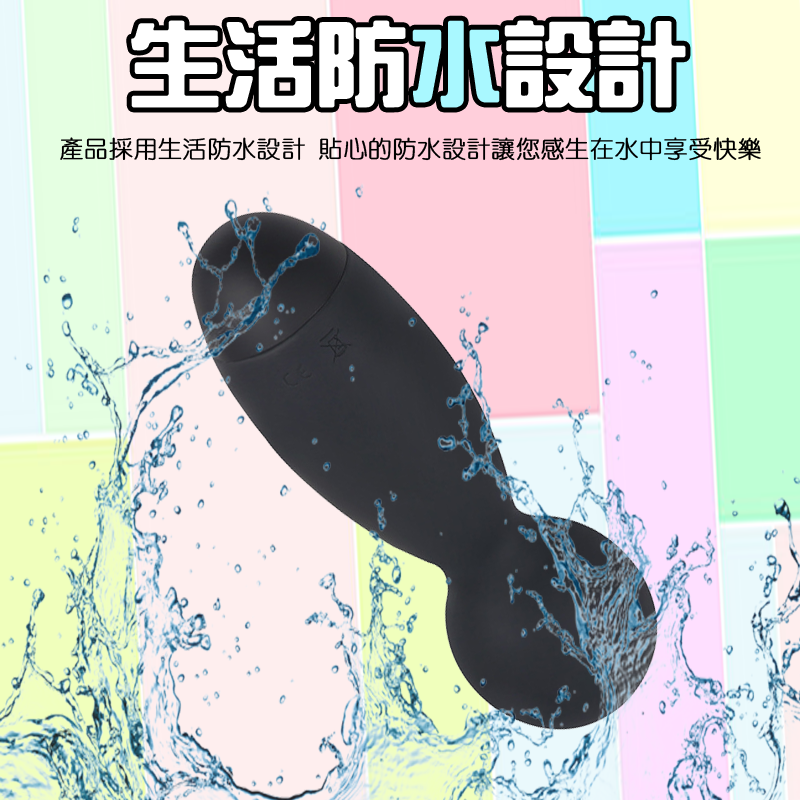
<style>
.page{position:relative;width:800px;height:800px}
.page>*{position:absolute;margin:0}
.t1{font:90.9px "HanWangZonYi";color:#ffffff;font-weight:bold}
.t2{font:90.9px "HanWangZonYi";color:#a9f8ff;font-weight:bold}
.t3{font:24px "HanWangYenLight";color:#000000;font-weight:bold}
</style>
<div class="page">
<p class="t1" style="left:131px;top:20px;width:555px;height:88px">生活防<span class="t2">水</span>設計</p>
<p class="t3" style="left:60px;top:137px;width:701px;height:24px">產品採用生活防水設計 貼心的防水設計讓您感生在水中享受快樂</p>
</div>
